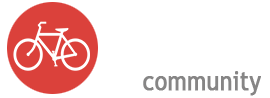
<style>
.page{position:relative;width:270px;height:98px;background:#ffffff}
.page>*{position:absolute;margin:0}
.t1{font:26.4px "TrebuchetMS";color:#868585;font-weight:bold;scale:0.86 1}
</style>
<div class="page">
<p class="t1" style="left:143px;top:71px;width:118px;height:25px">community</p>
</div>
